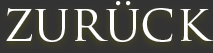
<style>
.page{position:relative;width:213px;height:53px;background:#333333}
.page>*{position:absolute;margin:0}
.t1{font:50px "TrajanPro-Regular";color:#ffffff}
</style>
<div class="page">
<p class="t1" style="left:6px;top:1px;width:207px;height:41px">zurück</p>
</div>
